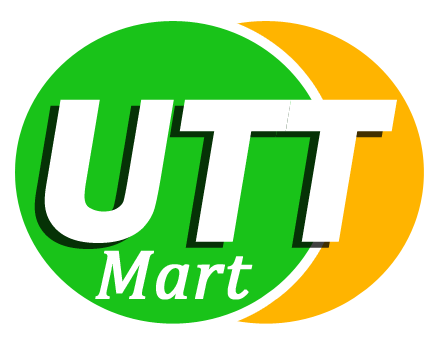
<style>
.page{position:relative;width:440px;height:343px;background:#ffffff}
.page>*{position:absolute;margin:0}
.t1{font:204.7px "FranklinGothic-DemiItalic";color:#ffffff;font-weight:bold}
.t2{font:71px "Cambria-Italic";color:#ffffff;font-weight:bold}
</style>
<div class="page">
<p class="t1" style="left:44px;top:99px;width:353px;height:144px">UTT</p>
<p class="t2" style="left:95px;top:250px;width:158px;height:50px">Mart</p>
</div>
